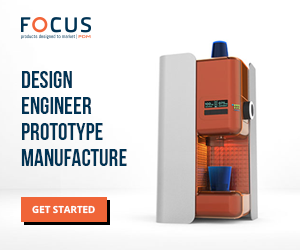
<style>
.page{position:relative;width:300px;height:250px;background:#ffffff}
.page>*{position:absolute;margin:0}
.t1{font:24px/26px "BebasNeueBold";color:#003354}
.t2{font:9.7px "OpenSans-Bold";color:#ffffff}
</style>
<div class="page">
<p class="t1" style="left:21px;top:71px;width:106px;height:95px">DESIGN<br>ENGINEER  <br>PROTOTYPE<br>MANUFACTURE</p>
<p class="t2" style="left:32px;top:205px;width:63px;height:9px">GET STARTED</p>
</div>
